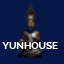
<style>
.page{position:relative;width:64px;height:64px;background:#051747}
.page>*{position:absolute;margin:0}
.t1{font:9.8px "Raleway-Bold";letter-spacing:0.01em;color:#fdfdfe;text-transform:uppercase}
</style>
<div class="page">
<p class="t1" style="left:2px;top:42px;width:56px;height:7px">yunhouse</p>
</div>
